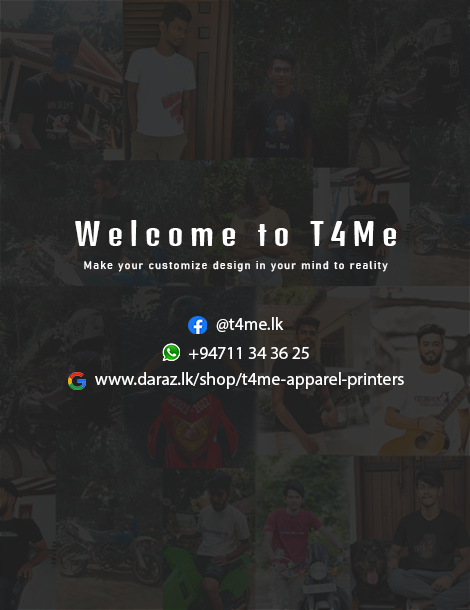
<style>
.page{position:relative;width:470px;height:610px}
.page>*{position:absolute;margin:0}
.t1{font:30.3px "DenkOne-Regular";letter-spacing:0.22em;color:#ffffff}
.t2{font:11px "Bahnschrift";letter-spacing:0.1em;color:#ffffff}
.t3{font:17.6px "MyriadPro-Regular";color:#ffffff}
</style>
<div class="page">
<p class="t1" style="left:75px;top:220px;width:322px;height:26px">Welcome to T4Me</p>
<p class="t2" style="left:84px;top:261px;width:304px;height:11px">Make your customize design in your mind to reality</p>
<p class="t3" style="left:216px;top:317px;width:68px;height:15px">@t4me.lk</p>
<p class="t3" style="left:189px;top:347px;width:120px;height:13px">+94711 34 36 25</p>
<p class="t3" style="left:95px;top:372px;width:309px;height:17px">www.daraz.lk/shop/t4me-apparel-printers</p>
</div>
